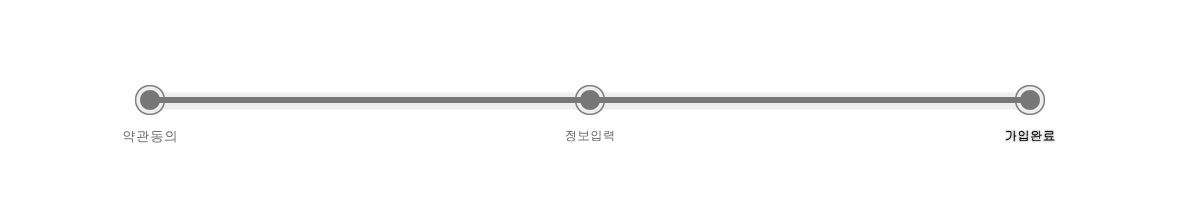
<style>
.page{position:relative;width:1180px;height:200px;background:#ffffff}
.page>*{position:absolute;margin:0}
.t1{font:14px "Gulim";color:#777777}
.t2{font:12.7px "Gulim";color:#777777}
.t3{font:12.7px "Gulim";color:#000000}
</style>
<div class="page">
<p class="t1" style="left:123px;top:130px;width:53px;height:13px">약관동의</p>
<p class="t2" style="left:565px;top:130px;width:49px;height:12px">정보입력</p>
<p class="t3" style="left:1005px;top:130px;width:50px;height:12px">가입완료</p>
</div>
